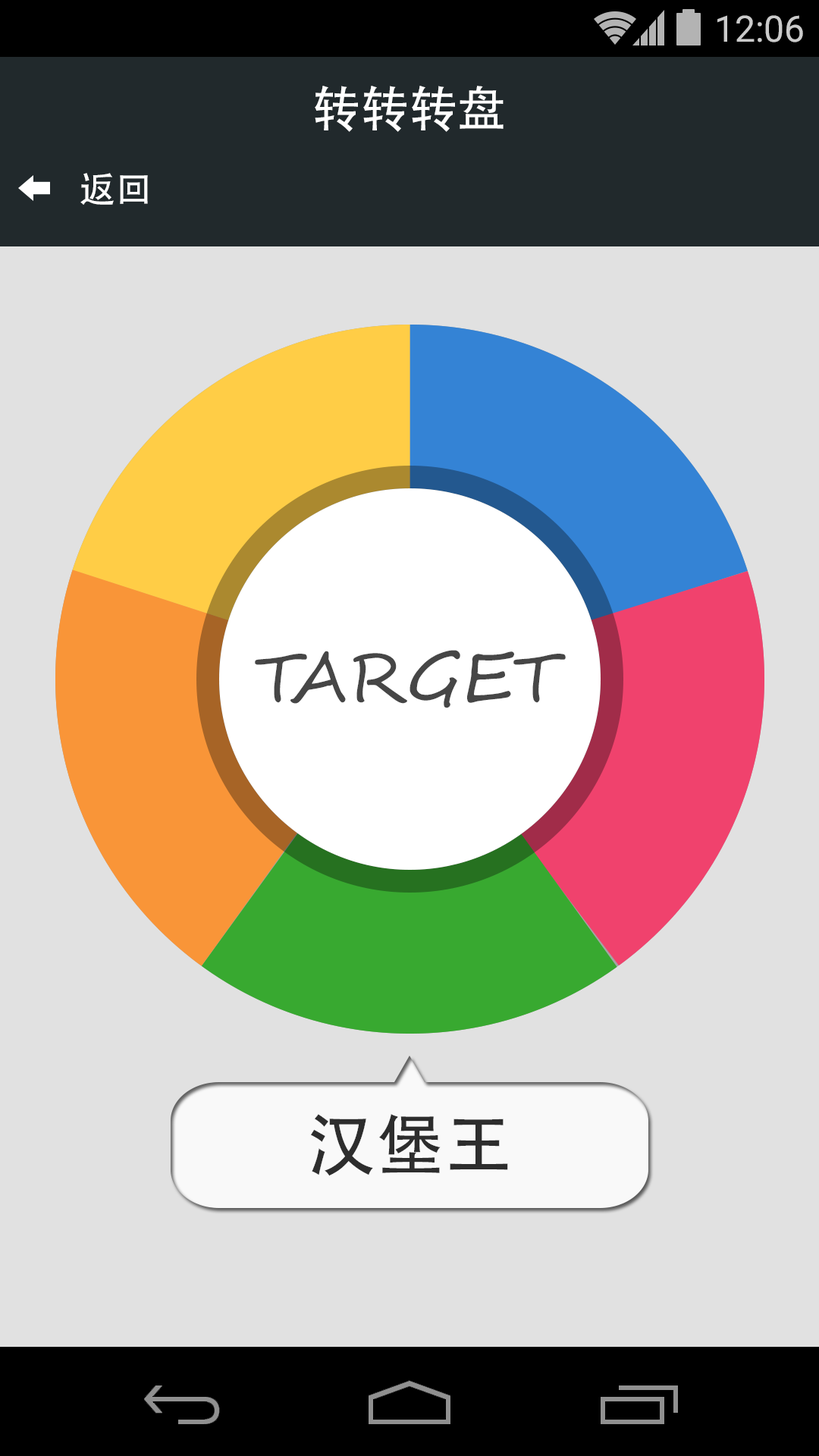
<style>
.page{position:relative;width:819px;height:1456px;background:#e1e1e1}
.page>*{position:absolute;margin:0}
.t1{font:36.4px "Roboto-Regular";color:#cbcbcb}
.t2{font:48.5px "AdobeHeitiStd-Regular";color:#ffffff}
.t3{font:36.4px "AdobeHeitiStd-Regular";color:#ffffff}
.t4{font:68.2px "SegoeScript";color:#464646}
.t5{font:68.2px "AdobeHeitiStd-Regular";color:#2d2d2d}
</style>
<div class="page">
<p class="t1" style="left:717px;top:15px;width:86px;height:27px">12:06</p>
<p class="t2" style="left:315px;top:86px;width:189px;height:46px">转转转盘</p>
<p class="t3" style="left:80px;top:173px;width:68px;height:32px">返回</p>
<p class="t4" style="left:255px;top:650px;width:311px;height:58px">TARGET</p>
<p class="t5" style="left:311px;top:1114px;width:197px;height:62px">汉堡王</p>
</div>
